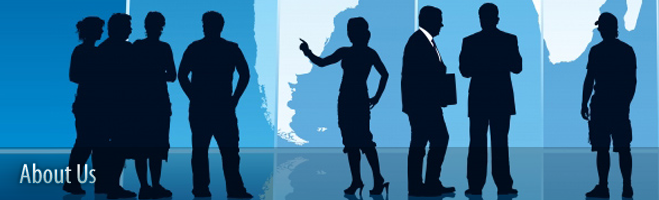
<style>
.page{position:relative;width:659px;height:200px}
.page>*{position:absolute;margin:0}
.t1{font:28px "MyriadPro-Cond"}
</style>
<div class="page">
<p class="t1" style="left:19px;top:163px;width:77px;height:21px">About Us</p>
</div>
